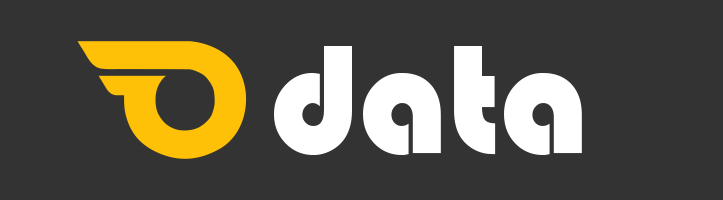
<style>
.page{position:relative;width:723px;height:200px;background:#333333}
.page>*{position:absolute;margin:0}
.t1{font:160.9px "Bauhaus93";color:#ffffff;scale:0.95 1}
</style>
<div class="page">
<p class="t1" style="left:274px;top:46px;width:308px;height:109px">data</p>
</div>
